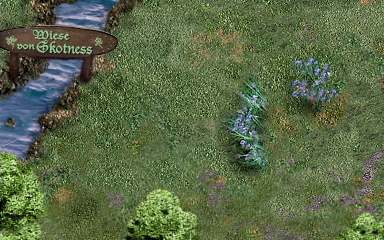
<style>
.page{position:relative;width:384px;height:240px}
.page>*{position:absolute;margin:0}
.t1{font:12px "DucDeBerry";color:#a3e3a4;scale:1.28 1}
.t2{font:15px "DucDeBerry";color:#a3e3a4;scale:1.05 1}
.t3{font:10px "DucDeBerry";color:#a3e3a4;scale:1.28 1}
</style>
<div class="page">
<p class="t1" style="left:33px;top:29px;width:37px;height:11px;rotate:2deg;opacity:0.85">Wiese</p>
<p class="t2" style="left:36px;top:39px;width:56px;height:16px;rotate:2deg;opacity:0.85">Skotness</p>
<p class="t3" style="left:17px;top:43px;width:18px;height:7px;rotate:2deg;opacity:0.85">von</p>
</div>
